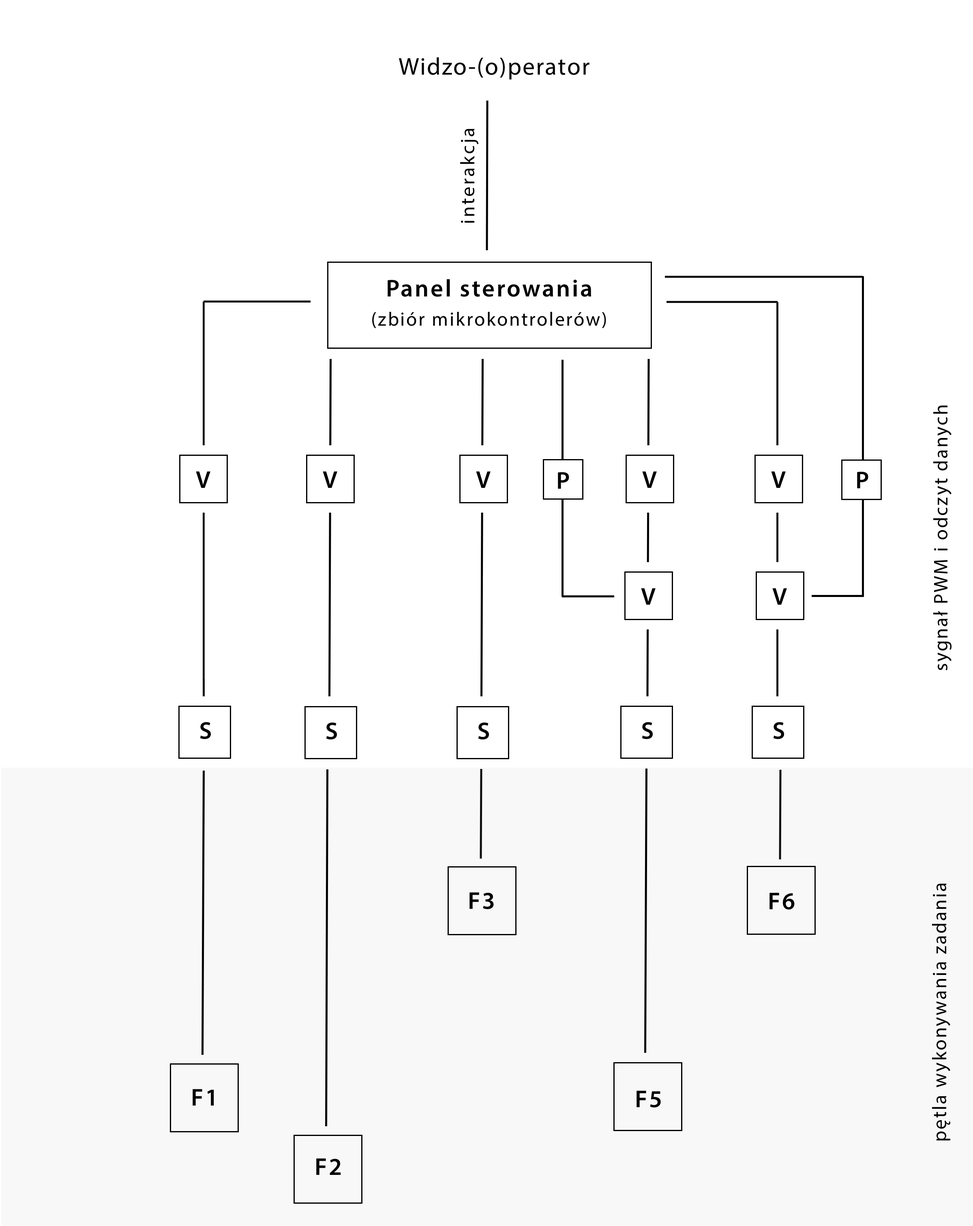
<style>
.page{position:relative;width:973px;height:1226px;background:#ffffff}
.page>*{position:absolute;margin:0}
.t1{font:24.3px "MyriadPro-Regular";letter-spacing:0.05em;color:#000000}
.t2{font:19.5px "MyriadPro-Regular";letter-spacing:0.1em;color:#000000}
.t3{font:19.5px/29.2px "MyriadPro-Regular";letter-spacing:0.075em;color:#000000}
.t4{font:24.3px/29.2px "MyriadPro-Semibold";letter-spacing:0.075em;color:#000000}
.t5{font:19.5px "MyriadPro-Regular";letter-spacing:0.075em;color:#000000}
.t6{font:24.3px "MyriadPro-Semibold";letter-spacing:0.075em;color:#000000}
</style>
<div class="page">
<p class="t1" style="left:399px;top:57px;width:190px;height:22px">Widzo-(o)perator</p>
<p class="t2" style="left:460px;top:129px;width:18px;height:94px;rotate:-90deg">interakcja</p>
<p class="t3" style="left:372px;top:279px;width:234px;height:49px;text-align:justify"><span class="t4">Panel sterowania<br></span>(zbiór mikrokontrolerów)</p>
<p class="t5" style="left:933px;top:405px;width:18px;height:265px;rotate:-90deg">sygnał PWM i odczyt danych</p>
<p class="t6" style="left:558px;top:472px;width:11px;height:17px">P</p>
<p class="t6" style="left:857px;top:471px;width:11px;height:17px">P</p>
<p class="t6" style="left:469px;top:892px;width:25px;height:17px">F3</p>
<p class="t6" style="left:769px;top:892px;width:26px;height:17px">F6</p>
<p class="t5" style="left:932px;top:883px;width:18px;height:257px;rotate:-90deg">pętla wykonywania zadania</p>
<p class="t6" style="left:193px;top:1089px;width:21px;height:16px">F1</p>
<p class="t6" style="left:636px;top:1090px;width:25px;height:17px">F5</p>
<p class="t6" style="left:316px;top:1158px;width:25px;height:16px">F2</p>
</div>
